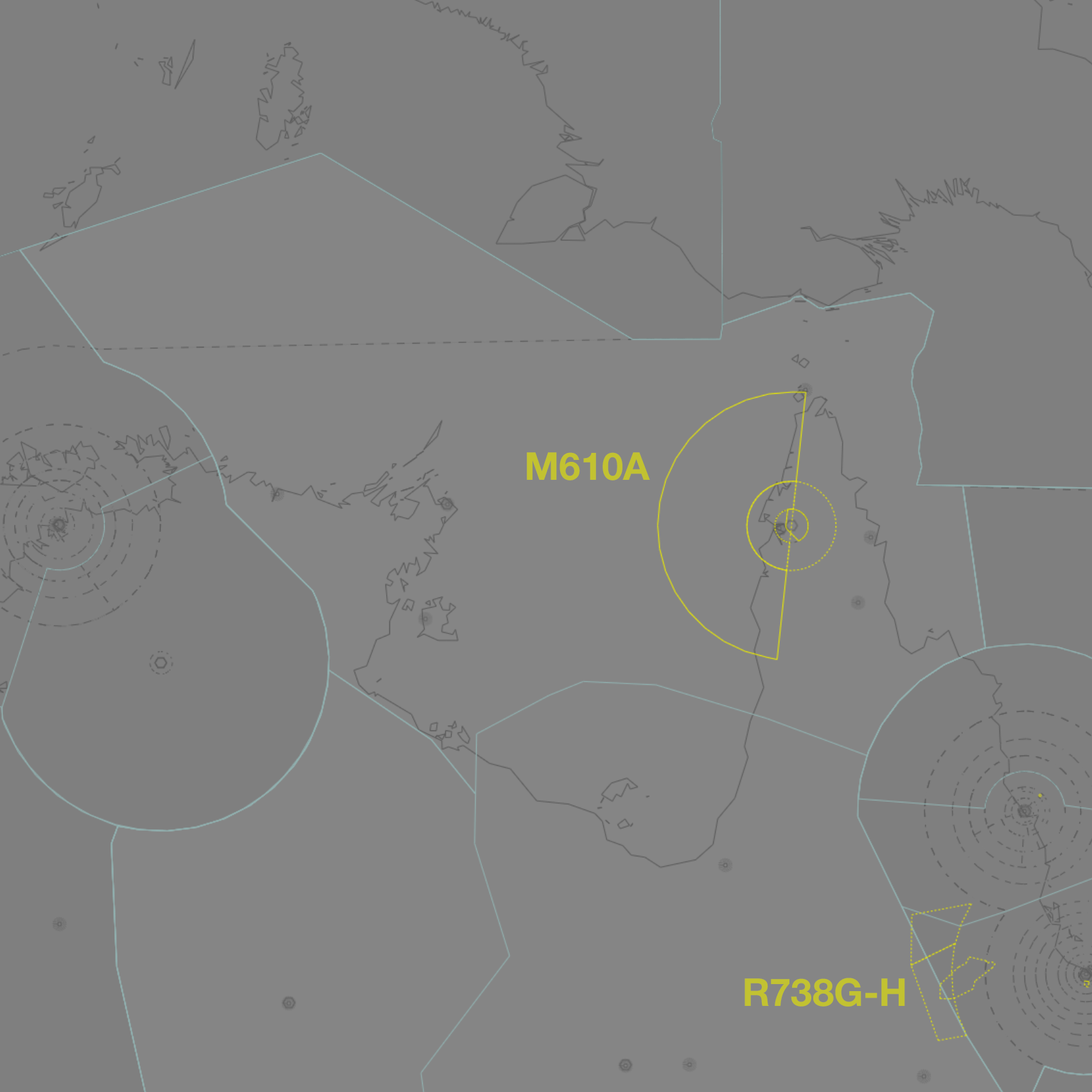
<style>
.page{position:relative;width:1092px;height:1092px;background:#858585}
.page>*{position:absolute;margin:0}
.t1{font:38.5px "HelveticaNeue-Bold";color:#c2c231}
</style>
<div class="page">
<p class="t1" style="left:527px;top:452px;width:123px;height:28px">M610A</p>
<p class="t1" style="left:744px;top:978px;width:161px;height:29px">R738G-H</p>
</div>
